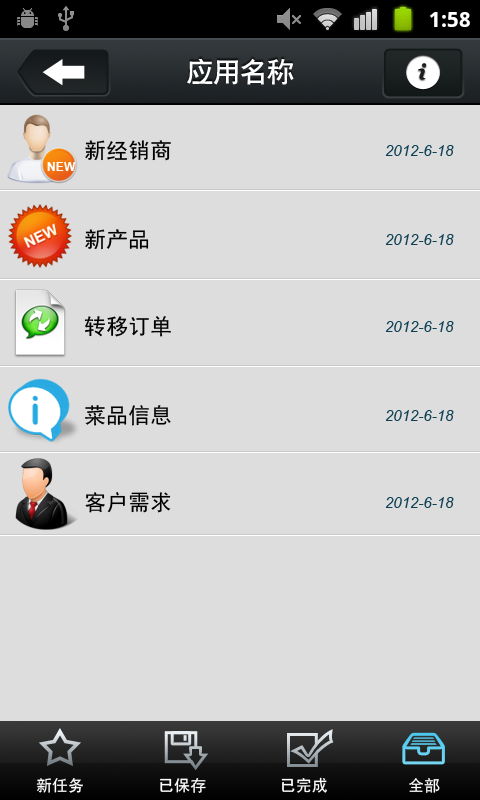
<style>
.page{position:relative;width:480px;height:800px;background:#dddddd}
.page>*{position:absolute;margin:0}
.t1{font:27px "CTCuHeiSJ";color:#ffffff}
.t2{font:22px "SimHei";color:#000000}
.t3{font:15px "Arial-ItalicMT";color:#0e4054}
.t4{font:12.2px "Arial-BoldMT";color:#ffffff}
.t5{font:16px "SimHei";color:#ffffff}
</style>
<div class="page">
<p class="t1" style="left:187px;top:58px;width:107px;height:27px">应用名称</p>
<p class="t2" style="left:85px;top:140px;width:86px;height:21px">新经销商</p>
<p class="t3" style="left:385px;top:145px;width:69px;height:11px">2012-6-18</p>
<p class="t4" style="left:47px;top:162px;width:29px;height:9px">NEW</p>
<p class="t2" style="left:85px;top:229px;width:64px;height:21px">新产品</p>
<p class="t3" style="left:385px;top:234px;width:69px;height:11px">2012-6-18</p>
<p class="t2" style="left:84px;top:316px;width:87px;height:21px">转移订单</p>
<p class="t3" style="left:385px;top:321px;width:69px;height:11px">2012-6-18</p>
<p class="t2" style="left:85px;top:405px;width:86px;height:21px">菜品信息</p>
<p class="t3" style="left:385px;top:410px;width:69px;height:11px">2012-6-18</p>
<p class="t2" style="left:85px;top:492px;width:86px;height:21px">客户需求</p>
<p class="t3" style="left:385px;top:497px;width:69px;height:11px">2012-6-18</p>
<p class="t5" style="left:36px;top:778px;width:47px;height:15px">新任务</p>
<p class="t5" style="left:160px;top:778px;width:46px;height:15px">已保存</p>
<p class="t5" style="left:281px;top:777px;width:46px;height:16px">已完成</p>
<p class="t5" style="left:409px;top:778px;width:31px;height:15px">全部</p>
</div>
